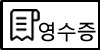
<style>
.page{position:relative;width:100px;height:50px;background:#ffffff}
.page>*{position:absolute;margin:0}
.t1{font:20px "MalgunGothic";color:#000000}
</style>
<div class="page">
<p class="t1" style="left:39px;top:22px;width:57px;height:20px">영수증</p>
</div>
